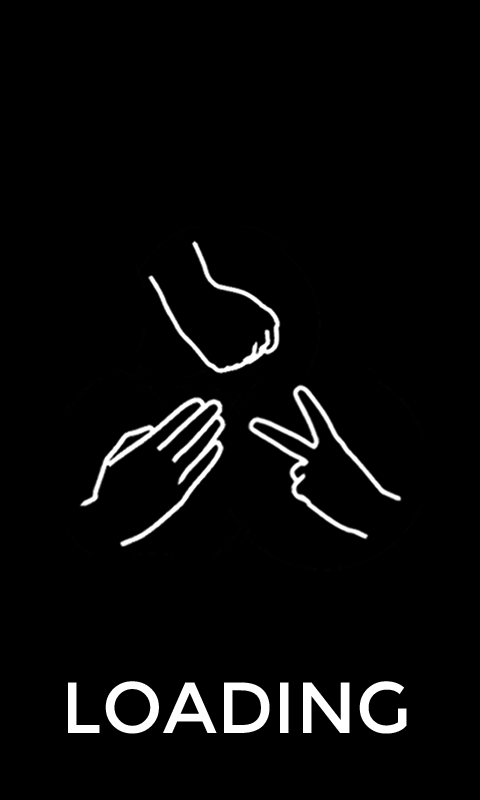
<style>
.page{position:relative;width:480px;height:800px;background:#000000}
.page>*{position:absolute;margin:0}
.t1{font:72.4px "Montserrat-Regular";color:#ffffff}
</style>
<div class="page">
<p class="t1" style="left:68px;top:681px;width:339px;height:53px">LOADING</p>
</div>
